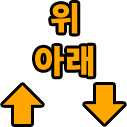
<style>
.page{position:relative;width:127px;height:127px;background:#ffffff}
.page>*{position:absolute;margin:0}
.t1{font:32px/42.7px "NotoSansKR-Black";color:#ffa700;font-weight:bold;scale:1.03 1}
</style>
<div class="page">
<p class="t1" style="left:35px;top:3px;width:59px;height:74px;text-align:center">위<br>아래</p>
</div>
